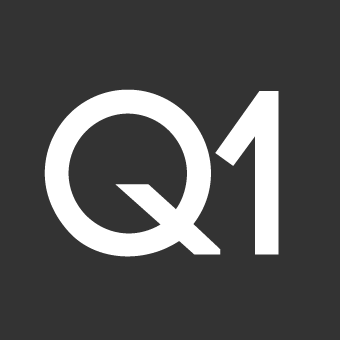
<style>
.page{position:relative;width:340px;height:340px;background:#333333}
.page>*{position:absolute;margin:0}
.t1{font:232.3px "Code-Bold";letter-spacing:0.025em;color:#ffffff}
</style>
<div class="page">
<p class="t1" style="left:44px;top:89px;width:235px;height:168px">Q1</p>
</div>
